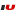
<style>
.page{position:relative;width:16px;height:16px;background:#ffffff}
.page>*{position:absolute;margin:0}
.t1{font:6.6px "MaximumLineSpeeder";color:#282828}
.t2{font:6.6px "MaximumLineSpeeder";color:#d00000}
</style>
<div class="page">
<p class="t1" style="left:0px;top:4px;width:16px;height:6px">I<span class="t2">U</span></p>
</div>
